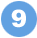
<style>
.page{position:relative;width:37px;height:38px;background:#62a1e1}
.page>*{position:absolute;margin:0}
.t1{font:23.9px "Arial-Black";color:#ffffff}
</style>
<div class="page">
<p class="t1" style="left:11px;top:9px;width:15px;height:19px">9</p>
</div>
